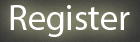
<style>
.page{position:relative;width:140px;height:42px}
.page>*{position:absolute;margin:0}
.t1{font:36px "MyriadPro-Regular";color:#ffffff}
</style>
<div class="page">
<p class="t1" style="left:10px;top:5px;width:120px;height:32px">Register</p>
</div>
